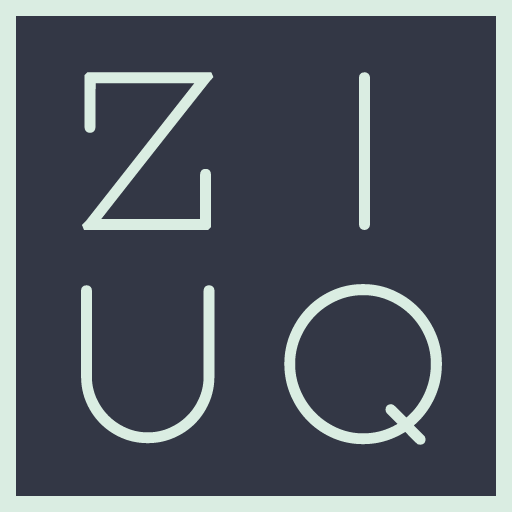
<style>
.page{position:relative;width:512px;height:512px;background:#333745}
.page>*{position:absolute;margin:0}
.t1{font:205px "Vow";color:#daede2;font-weight:bold}
</style>
<div class="page">
<p class="t1" style="left:82px;top:72px;width:132px;height:158px">Z</p>
<p class="t1" style="left:359px;top:72px;width:11px;height:158px">i</p>
<p class="t1" style="left:81px;top:285px;width:134px;height:159px">u</p>
<p class="t1" style="left:284px;top:284px;width:158px;height:161px">q</p>
</div>
